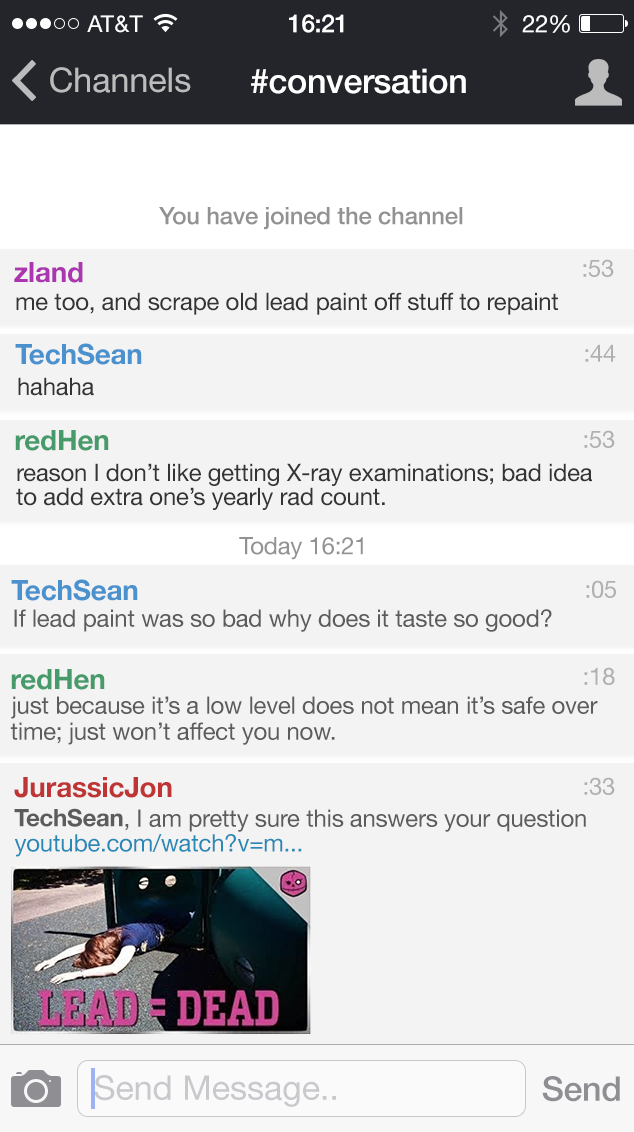
<style>
.page{position:relative;width:634px;height:1132px;background:#f3f3f3}
.page>*{position:absolute;margin:0}
.t1{font:23px "HelveticaNeue";letter-spacing:0.02em;color:#ffffff}
.t2{font:25px "HelveticaNeue-Medium";letter-spacing:-0.02em;color:#ffffff}
.t3{font:24px "HelveticaNeue";letter-spacing:-0.02em;color:#ffffff}
.t4{font:34px "HelveticaNeue";color:#bcbcbc}
.t5{font:34px "HelveticaNeue-Medium";letter-spacing:-0.01em;color:#ffffff}
.t6{font:24px "HelveticaNeue-Medium";letter-spacing:-0.01em;color:#929292}
.t7{font:28px "HelveticaNeue-Bold";letter-spacing:-0.01em;color:#ac36b0}
.t8{font:24px "HelveticaNeue";letter-spacing:-0.01em;color:#b1b0b0}
.t9{font:24px "HelveticaNeue";letter-spacing:-0.01em;color:#343434}
.t10{font:28px "HelveticaNeue-Bold";letter-spacing:-0.01em;color:#4b91cd}
.t11{font:28px "HelveticaNeue-Bold";letter-spacing:-0.01em;color:#479b6b}
.t12{font:24px/24px "HelveticaNeue";letter-spacing:-0.01em;color:#343434}
.t13{font:24px "HelveticaNeue";letter-spacing:-0.01em;color:#929292}
.t14{font:24px "HelveticaNeue";letter-spacing:-0.01em;color:#5c5c5c}
.t15{font:28px "HelveticaNeue-Bold";letter-spacing:-0.01em;color:#bf3434}
.t16{font:24px "HelveticaNeue-Bold";letter-spacing:-0.01em;color:#5c5c5c}
.t17{font:24px "HelveticaNeue";letter-spacing:-0.01em;color:#2989b6}
.t18{font:34px "HelveticaNeue";color:#c8c8cd}
.t19{font:34px "HelveticaNeue-Medium";letter-spacing:-0.01em;color:#8e8e93}
</style>
<div class="page">
<p class="t1" style="left:87px;top:15px;width:56px;height:18px">AT&amp;T</p>
<p class="t2" style="left:289px;top:14px;width:55px;height:19px">16:21</p>
<p class="t3" style="left:522px;top:15px;width:48px;height:18px">22%</p>
<p class="t4" style="left:50px;top:67px;width:141px;height:26px">Channels</p>
<p class="t5" style="left:251px;top:68px;width:215px;height:26px">#conversation</p>
<p class="t6" style="left:159px;top:207px;width:304px;height:23px">You have joined the channel</p>
<p class="t7" style="left:14px;top:262px;width:69px;height:21px">zland</p>
<p class="t8" style="left:583px;top:259px;width:31px;height:18px">:53</p>
<p class="t9" style="left:16px;top:292px;width:542px;height:23px">me too, and scrape old lead paint off stuff to repaint</p>
<p class="t10" style="left:15px;top:343px;width:127px;height:22px">TechSean</p>
<p class="t8" style="left:585px;top:344px;width:31px;height:18px">:44</p>
<p class="t9" style="left:18px;top:377px;width:76px;height:19px">hahaha</p>
<p class="t11" style="left:15px;top:430px;width:94px;height:21px">redHen</p>
<p class="t8" style="left:584px;top:430px;width:31px;height:18px">:53</p>
<p class="t12" style="left:16px;top:463px;width:576px;height:47px">reason I don’t like getting X-ray examinations; bad idea to add extra one’s yearly rad count.</p>
<p class="t13" style="left:239px;top:537px;width:124px;height:23px">Today 16:21</p>
<p class="t10" style="left:11px;top:579px;width:127px;height:22px">TechSean</p>
<p class="t8" style="left:586px;top:580px;width:30px;height:18px">:05</p>
<p class="t14" style="left:14px;top:609px;width:538px;height:23px">If lead paint was so bad why does it taste so good?</p>
<p class="t11" style="left:11px;top:669px;width:94px;height:21px">redHen</p>
<p class="t8" style="left:584px;top:667px;width:31px;height:18px">:18</p>
<p class="t14" style="left:11px;top:696px;width:587px;height:23px">just because it’s a low level does not mean it’s safe over</p>
<p class="t14" style="left:10px;top:722px;width:325px;height:23px">time; just won’t affect you now.</p>
<p class="t15" style="left:14px;top:777px;width:158px;height:21px">JurassicJon</p>
<p class="t8" style="left:584px;top:777px;width:31px;height:18px">:33</p>
<p class="t16" style="left:14px;top:808px;width:109px;height:19px">TechSean</p>
<p class="t14" style="left:125px;top:809px;width:461px;height:23px">, I am pretty sure this answers your question</p>
<p class="t17" style="left:14px;top:834px;width:288px;height:23px">youtube.com/watch?v=m...</p>
<p class="t18" style="left:94px;top:1075px;width:242px;height:32px">Send Message..</p>
<p class="t19" style="left:542px;top:1076px;width:78px;height:26px">Send</p>
</div>
